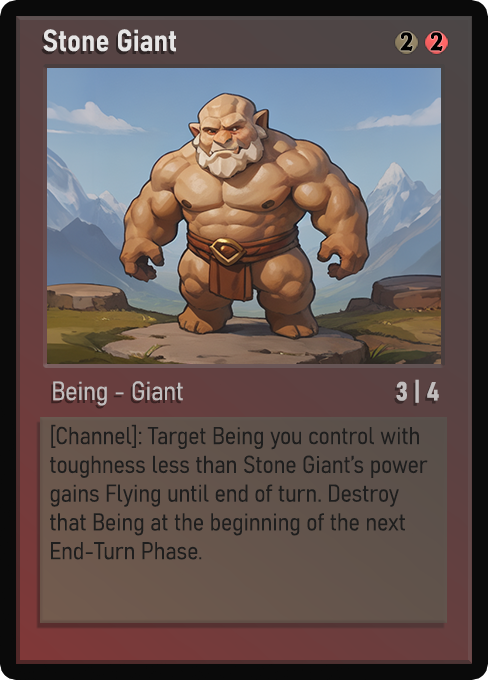
<style>
.page{position:relative;width:488px;height:680px}
.page>*{position:absolute;margin:0}
.t1{font:30px "Bahnschrift-SemiBoldSemiCondensed";color:#f2f2f2;font-weight:bold}
.t2{font:25px "WTRRoycroft";color:#000000;font-weight:bold;scale:1.09 1}
.t3{font:26px "Bahnschrift-LightSemiCondensed";color:#c8c8c8;font-weight:bold}
.t4{font:26px "Bahnschrift-BoldSemiCondensed";color:#c1bdbd;font-weight:bold}
.t5{font:24px "Bahnschrift-LightSemiCondensed";color:#1e1e1e;font-weight:bold}
</style>
<div class="page">
<p class="t1" style="left:43px;top:29px;width:133px;height:23px;opacity:0.9">Stone Giant</p>
<p class="t2" style="left:400px;top:32px;width:13px;height:19px">2</p>
<p class="t2" style="left:430px;top:32px;width:13px;height:19px">2</p>
<p class="t3" style="left:53px;top:381px;width:130px;height:25px;opacity:0.9">Being - Giant</p>
<p class="t4" style="left:396px;top:379px;width:43px;height:24px">3 | 4</p>
<p class="t5" style="left:50px;top:424px;width:378px;height:136px">[Channel]: Target Being you control with toughness less than Stone Giant’s power gains Flying until end of turn. Destroy that Being at the beginning of the next End-Turn Phase.</p>
</div>
